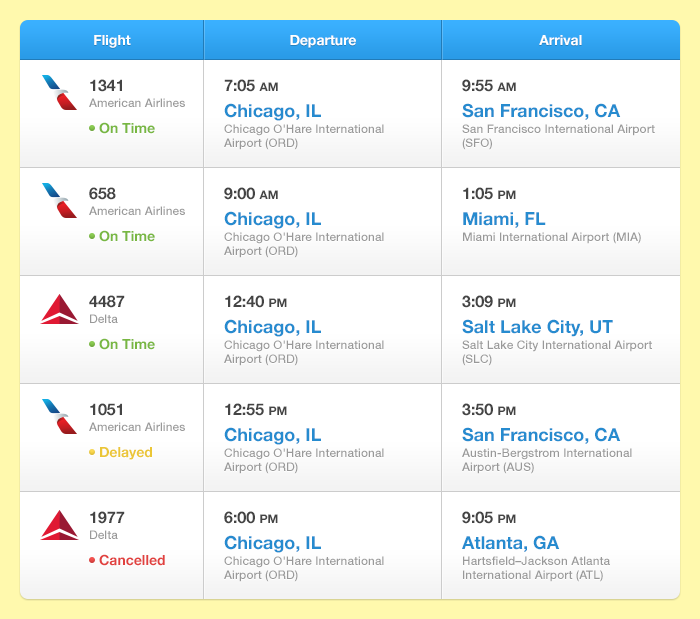
<style>
.page{position:relative;width:700px;height:619px;background:#ffffff}
.page>*{position:absolute;margin:0}
.t1{font:14px "HelveticaNeue-Bold";color:#ffffff}
.t2{font:12px/14px "HelveticaNeue-Medium";color:#999999}
.t3{font:16px/14px "HelveticaNeue-Bold";color:#444444}
.t4{font:14px/14px "HelveticaNeue-Bold";color:#78b742}
.t5{font:12px/14px "HelveticaNeue-Bold";color:#444444}
.t6{font:18px/14px "HelveticaNeue-Bold";color:#268bcf}
.t7{font:14px/14px "HelveticaNeue-Bold";color:#ebc636}
.t8{font:14px/14px "HelveticaNeue-Bold";color:#e1413f}
</style>
<div class="page">
<p class="t1" style="left:94px;top:35px;width:37px;height:13px">Flight</p>
<p class="t1" style="left:290px;top:35px;width:66px;height:13px">Departure</p>
<p class="t1" style="left:539px;top:35px;width:43px;height:11px">Arrival</p>
<p class="t2" style="left:89px;top:79px;width:96px;height:55px"><span class="t3">1341<br></span>American Airlines<br><span class="t4">On Time</span></p>
<p class="t2" style="left:224px;top:79px;width:160px;height:71px"><span class="t3">7:05 </span><span class="t5">AM<br></span><span class="t6">Chicago, IL<br></span>Chicago O'Hare International Airport (ORD)</p>
<p class="t2" style="left:462px;top:79px;width:193px;height:71px"><span class="t3">9:55 </span><span class="t5">AM<br></span><span class="t6">San Francisco, CA<br></span>San Francisco International Airport (SFO)</p>
<p class="t2" style="left:89px;top:187px;width:96px;height:55px"><span class="t3">658<br></span>American Airlines<br><span class="t4">On Time</span></p>
<p class="t2" style="left:224px;top:187px;width:160px;height:71px"><span class="t3">9:00 </span><span class="t5">AM<br></span><span class="t6">Chicago, IL<br></span>Chicago O'Hare International Airport (ORD)</p>
<p class="t2" style="left:463px;top:187px;width:178px;height:57px"><span class="t3">1:05 </span><span class="t5">PM<br></span><span class="t6">Miami, FL<br></span>Miami International Airport (MIA)</p>
<p class="t4" style="left:89px;top:295px;width:66px;height:55px"><span class="t3">4487<br></span><span class="t2">Delta<br></span>On Time</p>
<p class="t2" style="left:224px;top:295px;width:160px;height:71px"><span class="t3">12:40 </span><span class="t5">PM<br></span><span class="t6">Chicago, IL<br></span>Chicago O'Hare International Airport (ORD)</p>
<p class="t2" style="left:462px;top:295px;width:190px;height:71px"><span class="t3">3:09 </span><span class="t5">PM<br></span><span class="t6">Salt Lake City, UT<br></span>Salt Lake City International Airport (SLC)</p>
<p class="t2" style="left:89px;top:403px;width:96px;height:57px"><span class="t3">1051<br></span>American Airlines<br><span class="t7">Delayed</span></p>
<p class="t2" style="left:224px;top:403px;width:160px;height:71px"><span class="t3">12:55 </span><span class="t5">PM<br></span><span class="t6">Chicago, IL<br></span>Chicago O'Hare International Airport (ORD)</p>
<p class="t2" style="left:462px;top:403px;width:170px;height:71px"><span class="t3">3:50 </span><span class="t5">PM<br></span><span class="t6">San Francisco, CA<br></span>Austin-Bergstrom International Airport (AUS)</p>
<p class="t8" style="left:90px;top:511px;width:75px;height:55px"><span class="t3">1977<br></span><span class="t2">Delta<br></span>Cancelled</p>
<p class="t2" style="left:224px;top:511px;width:160px;height:71px"><span class="t3">6:00 </span><span class="t5">PM<br></span><span class="t6">Chicago, IL<br></span>Chicago O'Hare International Airport (ORD)</p>
<p class="t2" style="left:462px;top:511px;width:148px;height:71px"><span class="t3">9:05 </span><span class="t5">PM<br></span><span class="t6">Atlanta, GA<br></span>Hartsfield–Jackson Atlanta International Airport (ATL)</p>
</div>
